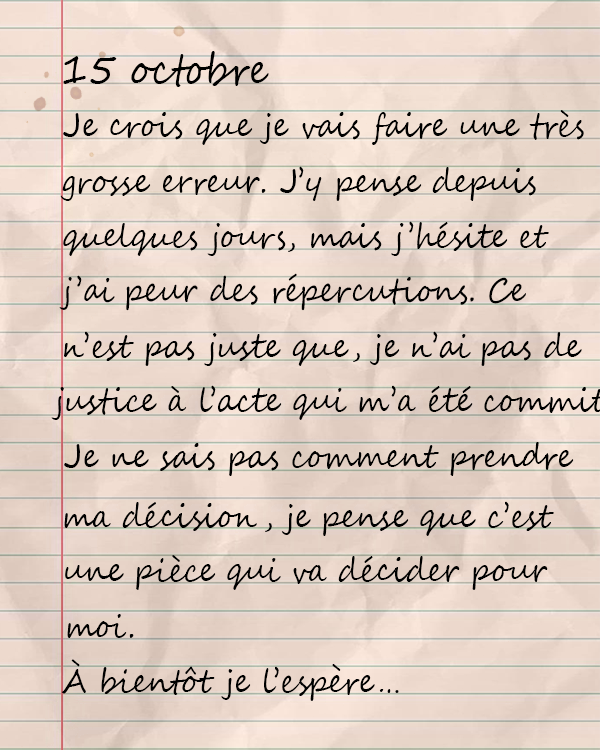
<style>
.page{position:relative;width:600px;height:750px}
.page>*{position:absolute;margin:0}
.t1{font:41.8px "SegoeScript";color:#000000;scale:0.9 1}
.t2{font:33.3px "SegoeScript";color:#000000;scale:0.9 1}
</style>
<div class="page">
<p class="t1" style="left:63px;top:51px;width:206px;height:36px">15 octobre</p>
<p class="t2" style="left:63px;top:110px;width:521px;height:35px">Je crois que je vais faire une très</p>
<p class="t2" style="left:60px;top:166px;width:476px;height:35px">grosse erreur. J’y pense depuis</p>
<p class="t2" style="left:63px;top:221px;width:486px;height:35px">quelques jours, mais j’hésite et</p>
<p class="t2" style="left:59px;top:273px;width:467px;height:38px">j’ai peur des répercutions. Ce</p>
<p class="t2" style="left:64px;top:331px;width:518px;height:35px">n’est pas juste que, je n’ai pas de</p>
<p class="t2" style="left:64px;top:442px;width:510px;height:34px">Je ne sais pas comment prendre</p>
<p class="t2" style="left:64px;top:501px;width:490px;height:35px">ma décision, je pense que c’est</p>
<p class="t2" style="left:65px;top:555px;width:483px;height:35px">une pièce qui va décider pour</p>
<p class="t2" style="left:67px;top:614px;width:67px;height:24px">moi.</p>
<p class="t2" style="left:61px;top:659px;width:338px;height:42px">À bientôt je l’espère…</p>
</div>
